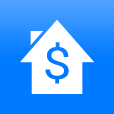
<style>
.page{position:relative;width:114px;height:114px;background:#007aff}
.page>*{position:absolute;margin:0}
.t1{font:44.4px "Roboto-Regular";color:#007aff;scale:1.15 1}
</style>
<div class="page">
<p class="t1" style="left:45px;top:42px;width:24px;height:42px">$</p>
</div>
